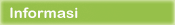
<style>
.page{position:relative;width:175px;height:25px;background:#96c04a}
.page>*{position:absolute;margin:0}
.t1{font:14.2px "ArialRoundedMTBold";color:#fdfcfc;scale:1.07 1}
</style>
<div class="page">
<p class="t1" style="left:10px;top:7px;width:68px;height:11px">Informasi</p>
</div>
